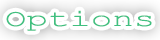
<style>
.page{position:relative;width:160px;height:40px;background:#ffffff}
.page>*{position:absolute;margin:0}
.t1{font:24px "Rod";color:#40c080;scale:1.49 1}
</style>
<div class="page">
<p class="t1" style="left:6px;top:10px;width:146px;height:21px">Options</p>
</div>
